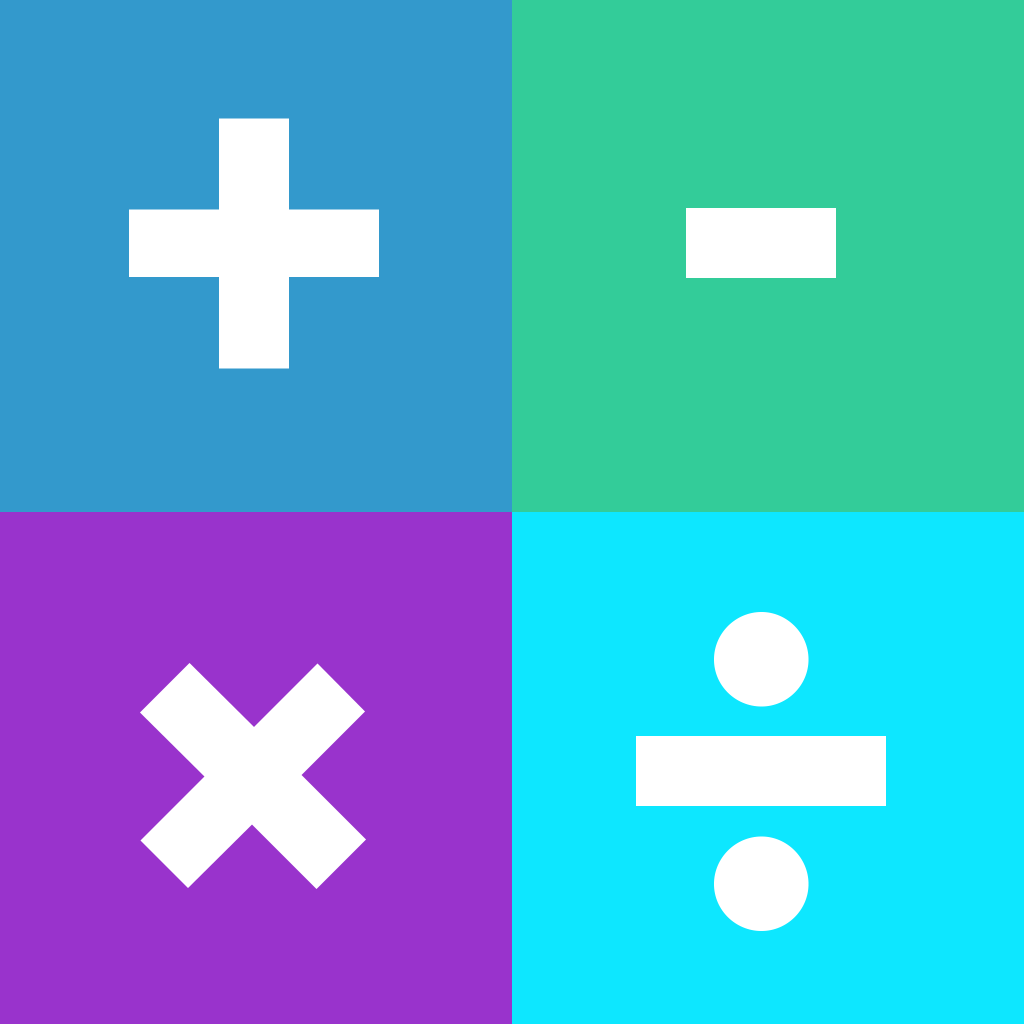
<style>
.page{position:relative;width:1024px;height:1024px;background:#33cc99}
.page>*{position:absolute;margin:0}
.t1{font:500px "MarvinVisions-Bold";color:#ffffff}
</style>
<div class="page">
<p class="t1" style="left:129px;top:118px;width:250px;height:251px">+</p>
<p class="t1" style="left:636px;top:612px;width:250px;height:319px">÷</p>
<p class="t1" style="left:140px;top:663px;width:226px;height:226px">×</p>
</div>
